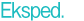
<style>
.page{position:relative;width:84px;height:21px;background:#ffffff}
.page>*{position:absolute;margin:0}
.t1{font:20px "GothicMB101Pro-Regular";letter-spacing:-0.06em;color:#1dbcc0;scale:0.9 1}
</style>
<div class="page">
<p class="t1" style="left:1px;top:2px;width:63px;height:19px">Eksped.</p>
</div>
